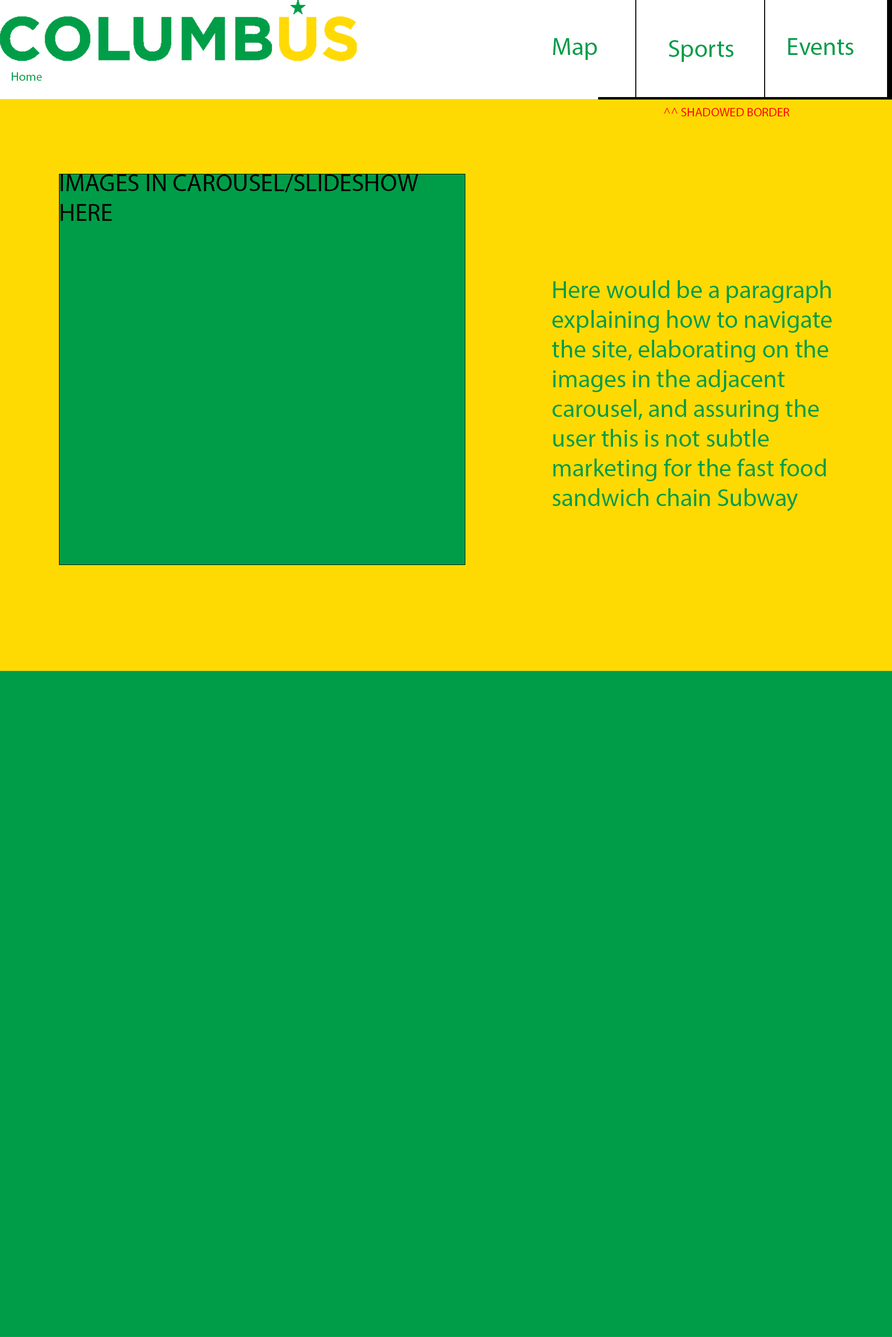
<style>
.page{position:relative;width:892px;height:1337px;background:#009d48}
.page>*{position:absolute;margin:0}
.t1{font:24.8px "MyriadPro-Regular";color:#009d48}
.t2{font:12.4px "MyriadPro-Regular";color:#009d48}
.t3{font:12.4px "MyriadPro-Regular";color:#ff0000}
.t4{font:24.8px "MyriadPro-Regular";color:#000000}
</style>
<div class="page">
<p class="t1" style="left:553px;top:38px;width:44px;height:22px">Map</p>
<p class="t1" style="left:668px;top:40px;width:65px;height:22px">Sports</p>
<p class="t1" style="left:788px;top:38px;width:65px;height:17px">Events</p>
<p class="t2" style="left:11px;top:72px;width:31px;height:9px">Home</p>
<p class="t3" style="left:664px;top:108px;width:125px;height:8px">^^ SHADOWED BORDER</p>
<p class="t4" style="left:60px;top:174px;width:358px;height:47px">IMAGES IN CAROUSEL/SLIDESHOW HERE</p>
<p class="t1" style="left:552px;top:280px;width:280px;height:232px">Here would be a paragraph explaining how to navigate the site, elaborating on the images in the adjacent carousel, and assuring the user this is not subtle marketing for the fast food sandwich chain Subway</p>
</div>
